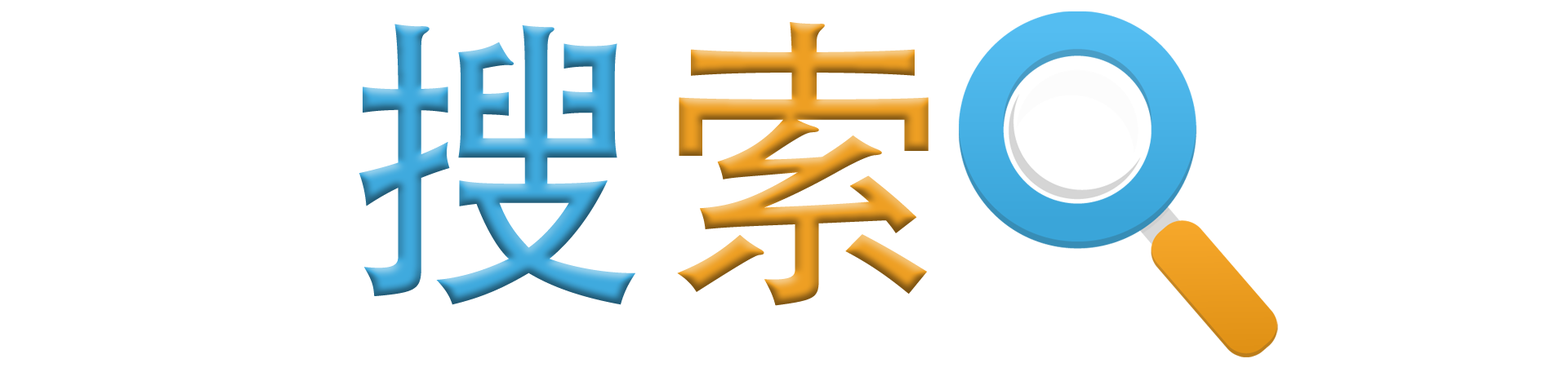
<style>
.page{position:relative;width:1568px;height:372px;background:#ffffff}
.page>*{position:absolute;margin:0}
.t1{font:306.2px "AdobeHeitiStd-Regular"}
</style>
<div class="page">
<p class="t1" style="left:359px;top:22px;width:570px;height:284px">搜索</p>
</div>
